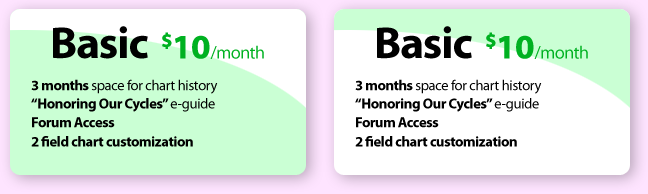
<style>
.page{position:relative;width:648px;height:194px;background:#ffffff}
.page>*{position:absolute;margin:0}
.t1{font:45px "MyriadPro-Bold";letter-spacing:-0.025em;color:#000000}
.t2{font:18px "MyriadPro-Regular";letter-spacing:-0.025em;color:#00b121}
.t3{font:34.4px "MyriadPro-Bold";letter-spacing:-0.025em;color:#00b121;font-weight:bold}
.t4{font:14.5px "MyriadPro-Regular";letter-spacing:-0.025em;color:#000000}
.t5{font:14.5px "MyriadPro-Bold";letter-spacing:-0.025em;color:#000000}
</style>
<div class="page">
<p class="t1" style="left:53px;top:26px;width:95px;height:33px">Basic</p>
<p class="t1" style="left:377px;top:26px;width:95px;height:33px">Basic</p>
<p class="t2" style="left:162px;top:32px;width:102px;height:27px"><span class="t3">$10</span>/month</p>
<p class="t2" style="left:486px;top:32px;width:102px;height:27px"><span class="t3">$10</span>/month</p>
<p class="t4" style="left:31px;top:79px;width:187px;height:15px"><span class="t5">3 months</span> space for chart history</p>
<p class="t4" style="left:355px;top:79px;width:187px;height:15px"><span class="t5">3 months</span> space for chart history</p>
<p class="t5" style="left:31px;top:98px;width:184px;height:14px">“Honoring Our Cycles” <span class="t4">e-guide</span></p>
<p class="t5" style="left:355px;top:98px;width:184px;height:14px">“Honoring Our Cycles” <span class="t4">e-guide</span></p>
<p class="t5" style="left:32px;top:117px;width:83px;height:11px">Forum Access</p>
<p class="t5" style="left:356px;top:117px;width:83px;height:11px">Forum Access</p>
<p class="t5" style="left:31px;top:136px;width:162px;height:11px">2 field chart customization</p>
<p class="t5" style="left:355px;top:136px;width:162px;height:11px">2 field chart customization</p>
</div>
